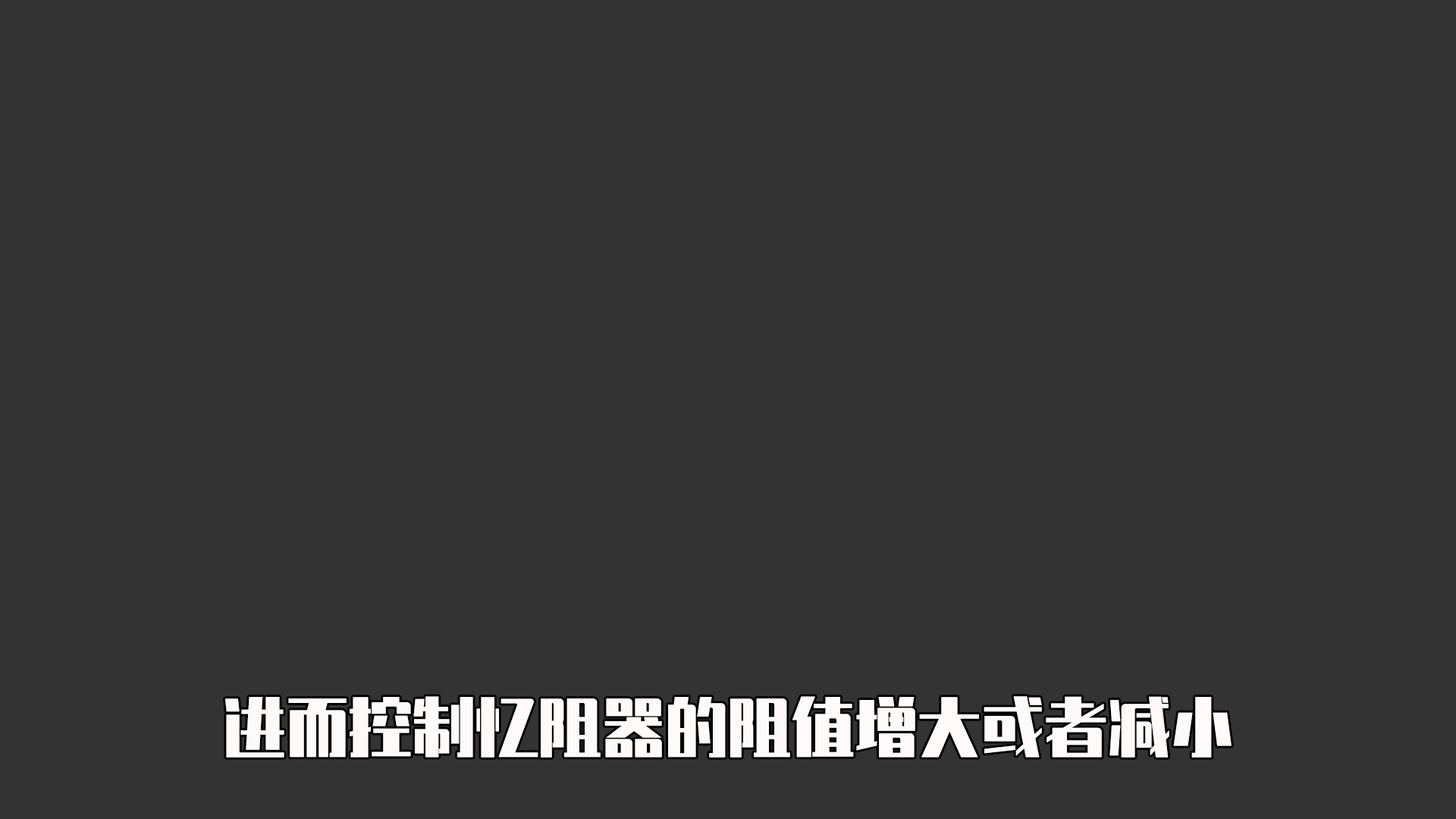
<style>
.page{position:relative;width:1456px;height:819px;background:#333333}
.page>*{position:absolute;margin:0}
.t1{font:63.2px "ZhenyanGB-Regular";color:#fefafa}
</style>
<div class="page">
<p class="t1" style="left:225px;top:696px;width:1007px;height:62px">进而控制忆阻器的阻值增大或者减小</p>
</div>
